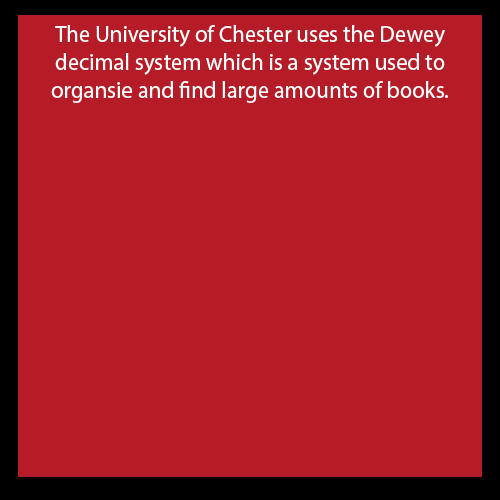
<style>
.page{position:relative;width:500px;height:500px;background:#b61c27}
.page>*{position:absolute;margin:0}
.t1{font:23.3px "MyriadPro-Regular";color:#ffffff}
</style>
<div class="page">
<p class="t1" style="left:51px;top:25px;width:397px;height:78px;text-align:center">The University of Chester uses the Dewey<br>decimal system which is a system used to <br>organsie and find large amounts of books.</p>
</div>
